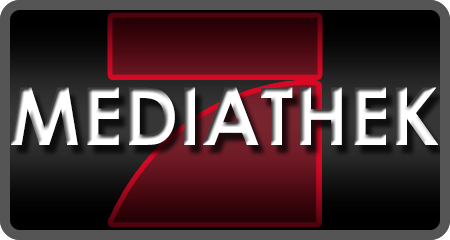
<style>
.page{position:relative;width:450px;height:240px}
.page>*{position:absolute;margin:0}
.t1{font:80px "CenturyGothic-Bold";color:#ffffff}
</style>
<div class="page">
<p class="t1" style="left:11px;top:87px;width:428px;height:58px">MEDIATHEK</p>
</div>
